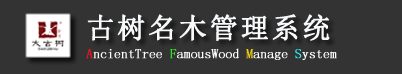
<style>
.page{position:relative;width:402px;height:74px;background:#333333}
.page>*{position:absolute;margin:0}
.t1{font:28px "NSimSun";letter-spacing:0.075em;color:#f7f9fb;font-weight:bold}
.t2{font:13.3px "NSimSun";letter-spacing:-0.005em;color:#fefdfd;font-weight:bold}
.t3{font:13.3px "NSimSun";letter-spacing:-0.005em;color:#ef121c;font-weight:bold}
.t4{font:13.3px "NSimSun";letter-spacing:-0.005em;color:#31e123;font-weight:bold}
.t5{font:13.3px "NSimSun";letter-spacing:-0.005em;color:#eccb14;font-weight:bold}
.t6{font:13.3px "NSimSun";letter-spacing:-0.005em;color:#2becea;font-weight:bold}
</style>
<div class="page">
<p class="t1" style="left:87px;top:14px;width:243px;height:27px">古树名木管理系统</p>
<p class="t2" style="left:86px;top:48px;width:251px;height:12px"><span class="t3">A</span>ncientTree <span class="t4">F</span>amousWood <span class="t5">M</span>anage <span class="t6">S</span>ystem</p>
</div>
